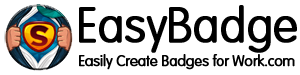
<style>
.page{position:relative;width:300px;height:75px;background:#ffffff}
.page>*{position:absolute;margin:0}
.t1{font:48px "VAGRoundedStd-Thin";letter-spacing:-0.025em;color:#000000;font-weight:bold}
.t2{font:15px "VAGRoundedStd-Thin";letter-spacing:-0.025em;color:#000000;font-weight:bold}
</style>
<div class="page">
<p class="t1" style="left:79px;top:5px;width:218px;height:48px">EasyBadge</p>
<p class="t2" style="left:79px;top:54px;width:216px;height:16px">Easily Create Badges for Work.com</p>
</div>
